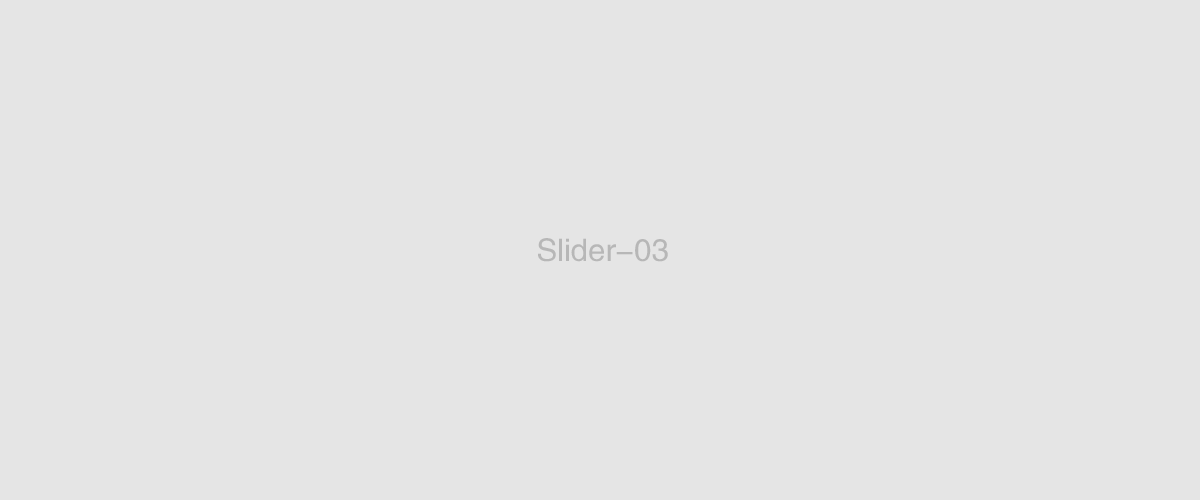
<style>
.page{position:relative;width:1200px;height:500px;background:#e5e5e5}
.page>*{position:absolute;margin:0}
.t1{font:31.3px "FZHTJW--GB1-0";color:#b7b7b7}
</style>
<div class="page">
<p class="t1" style="left:538px;top:238px;width:130px;height:24px">Slider-03</p>
</div>
